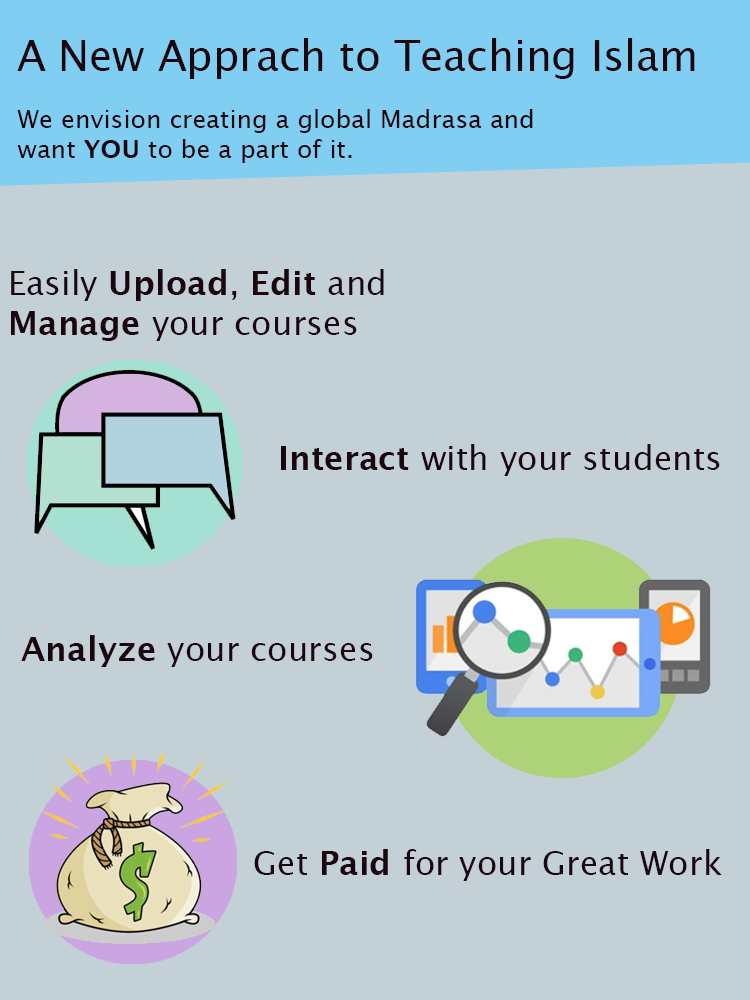
<style>
.page{position:relative;width:750px;height:1000px;background:#c3d0d6}
.page>*{position:absolute;margin:0}
.t1{font:41.7px "LucidaGrande";color:#1b060e}
.t2{font:25px "LucidaGrande";color:#1b060e}
.t3{font:25px "LucidaGrande-Bold";color:#1b060e}
.t4{font:33.3px "LucidaGrande";color:#1b060e}
.t5{font:33.3px "LucidaGrande-Bold";color:#1b060e}
</style>
<div class="page">
<p class="t1" style="left:17px;top:38px;width:678px;height:41px">A New Apprach to Teaching Islam</p>
<p class="t2" style="left:17px;top:109px;width:516px;height:54px">We envision creating a global Madrasa and <br>want <span class="t3">YOU </span>to be a part of it.</p>
<p class="t4" style="left:11px;top:269px;width:373px;height:72px">Easily <span class="t5">Upload</span>, <span class="t5">Edit </span>and <br><span class="t5">Manage </span>your courses</p>
<p class="t4" style="left:281px;top:444px;width:439px;height:32px"><span class="t5">Interact </span>with your students</p>
<p class="t4" style="left:21px;top:635px;width:352px;height:32px"><span class="t5">Analyze </span>your courses</p>
<p class="t4" style="left:254px;top:849px;width:468px;height:32px">Get <span class="t5">Paid </span>for your Great Work</p>
</div>
